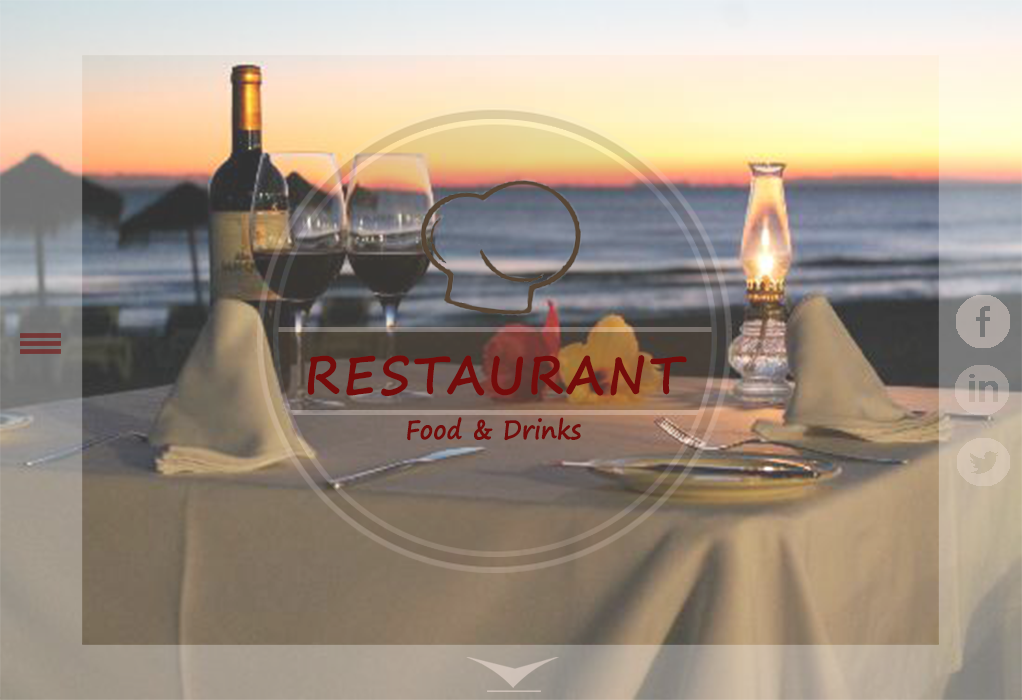
<style>
.page{position:relative;width:1022px;height:700px}
.page>*{position:absolute;margin:0}
.t1{font:26.4px "SegoePrint-Bold";color:#740c0b;scale:0.91 1}
.t2{font:52.8px "SegoePrint-Bold";letter-spacing:0.075em;color:#740c0b;scale:0.91 1}
</style>
<div class="page">
<p class="t1" style="left:307px;top:355px;width:380px;height:86px;text-align:center"><span class="t2">RESTAURANT<br><br></span>Food &amp; Drinks</p>
</div>
